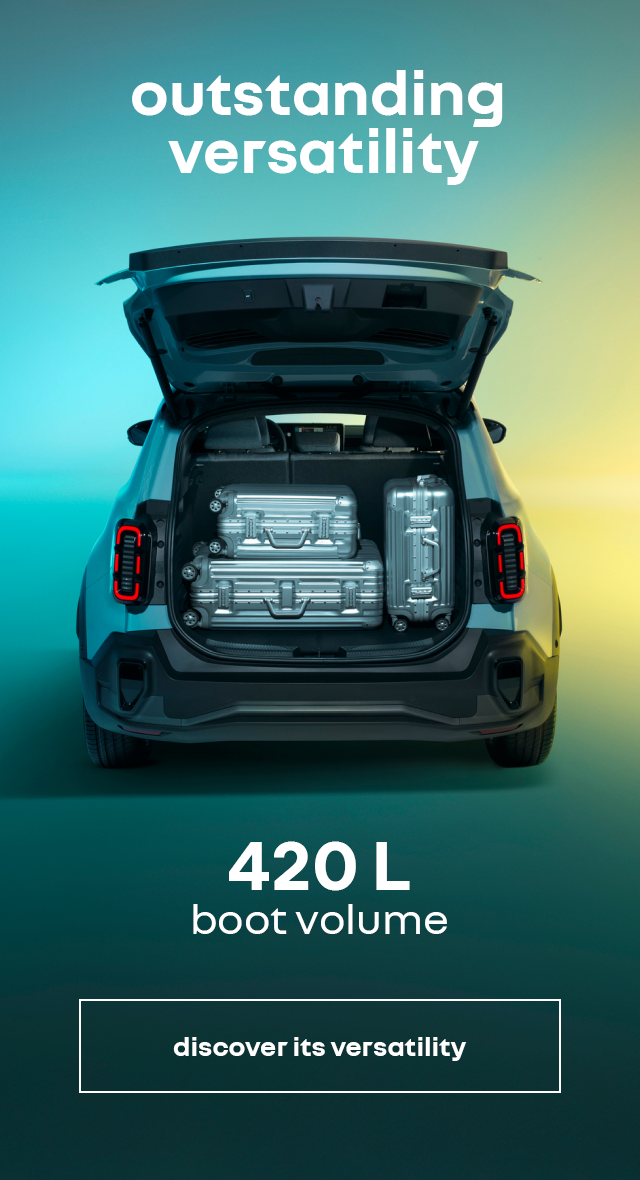
<style>
.page{position:relative;width:640px;height:1180px}
.page>*{position:absolute;margin:0}
.t1{font:64px/58px "NouvelR-Bold";color:#ffffff}
.t2{font:44px/44px "NouvelR-Regular";color:#ffffff}
.t3{font:74px/44px "NouvelR-Bold";color:#ffffff}
.t4{font:28px "NouvelR-Bold";color:#ffffff}
</style>
<div class="page">
<p class="t1" style="left:132px;top:70px;width:371px;height:115px;text-align:center">outstanding <br>versatility</p>
<p class="t2" style="left:193px;top:841px;width:254px;height:93px;text-align:center"><span class="t3">420 L<br></span>boot volume</p>
<p class="t4" style="left:173px;top:1037px;width:294px;height:24px">discover its versatility</p>
</div>
